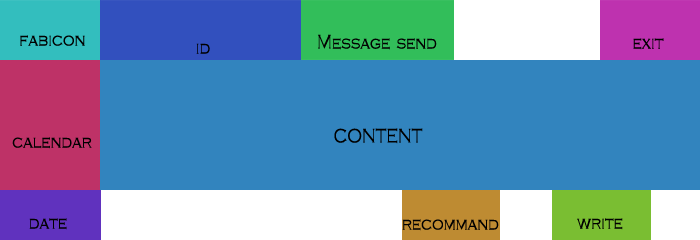
<style>
.page{position:relative;width:700px;height:240px;background:#3284be}
.page>*{position:absolute;margin:0}
.t1{font:18px "Yj-GOTGAE-Medium";color:#000000}
.t2{font:18px "Yj-GOTGAE-Medium";color:#010101}
</style>
<div class="page">
<p class="t1" style="left:20px;top:35px;width:65px;height:11px">fabicon</p>
<p class="t2" style="left:318px;top:34px;width:119px;height:16px">Message send</p>
<p class="t1" style="left:633px;top:38px;width:31px;height:12px">exit</p>
<p class="t1" style="left:196px;top:43px;width:14px;height:11px">id</p>
<p class="t1" style="left:12px;top:137px;width:80px;height:12px">calendar</p>
<p class="t1" style="left:334px;top:128px;width:89px;height:16px">CONTENT</p>
<p class="t1" style="left:29px;top:218px;width:38px;height:12px">date</p>
<p class="t1" style="left:402px;top:219px;width:97px;height:12px">recommand</p>
<p class="t1" style="left:577px;top:218px;width:46px;height:12px">write</p>
</div>
